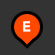
<style>
.page{position:relative;width:55px;height:55px;background:#333333}
.page>*{position:absolute;margin:0}
.t1{font:14px "Avenir-Heavy";color:#ffffff}
</style>
<div class="page">
<p class="t1" style="left:23px;top:21px;width:8px;height:11px">E</p>
</div>
